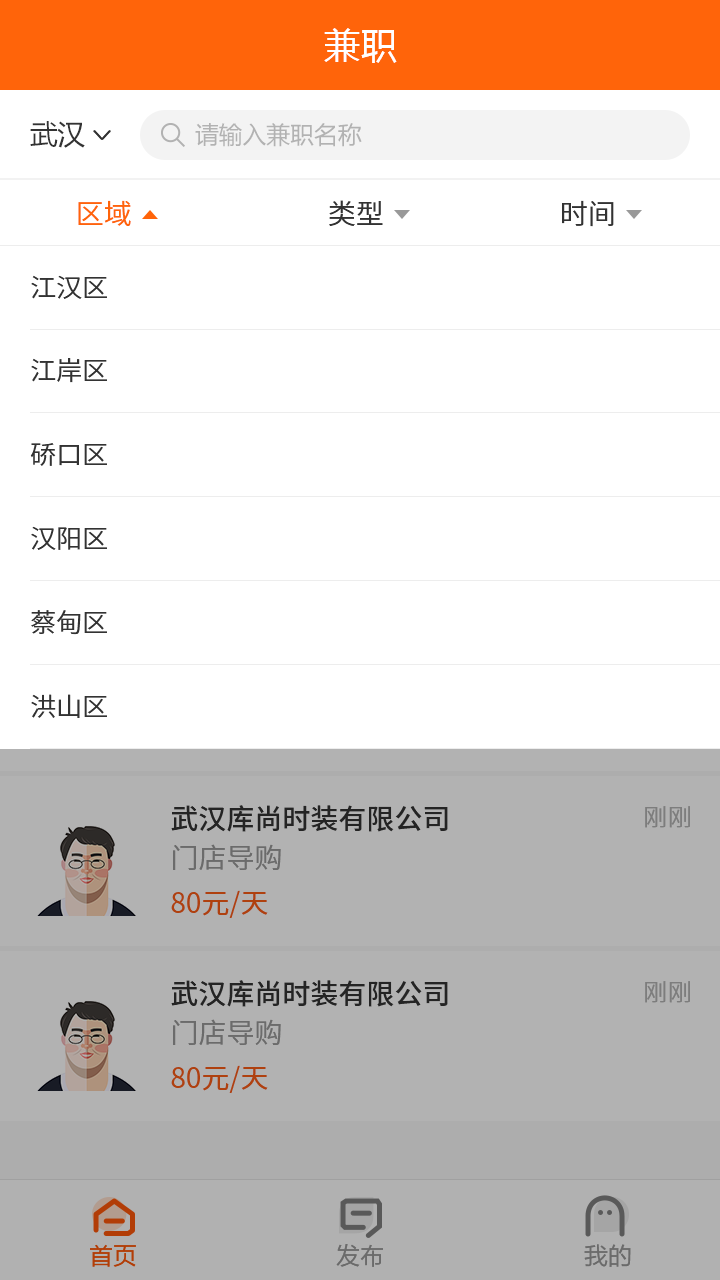
<style>
.page{position:relative;width:720px;height:1280px;background:#ffffff}
.page>*{position:absolute;margin:0}
.t1{font:36px "MicrosoftYaHei";letter-spacing:0.03em;color:#ffffff}
.t2{font:28px "MicrosoftYaHei";color:#333333}
.t3{font:24px "MicrosoftYaHei";color:#b2b2b2}
.t4{font:28px "NotoSansCJKsc-DemiLight";color:#ff640a;font-variant:small-caps}
.t5{font:28px "NotoSansCJKsc-DemiLight";color:#333333;font-variant:small-caps}
.t6{font:26px "NotoSansCJKsc-DemiLight";color:#333333}
.t7{font:28px "NotoSansCJKsc-Medium";color:#333333;font-variant:small-caps}
.t8{font:24px "NotoSansCJKsc-DemiLight";letter-spacing:0.03em;color:#7d7d7d;font-variant:small-caps}
.t9{font:28px "NotoSansCJKsc-DemiLight";color:#6b6b6b;font-variant:small-caps}
.t10{font:28px "NotoSansCJKsc-Regular";color:#af410f;font-variant:small-caps}
.t11{font:24px "FZLTHJW--GB1-0";color:#b23d07}
.t12{font:24px "FZLTHJW--GB1-0";color:#6b6b6b}
</style>
<div class="page">
<p class="t1" style="left:324px;top:28px;width:73px;height:35px">兼职</p>
<p class="t2" style="left:30px;top:121px;width:55px;height:27px">武汉</p>
<p class="t3" style="left:195px;top:123px;width:167px;height:24px">请输入兼职名称</p>
<p class="t4" style="left:78px;top:200px;width:53px;height:26px">区域</p>
<p class="t5" style="left:329px;top:200px;width:54px;height:26px">类型</p>
<p class="t5" style="left:562px;top:200px;width:52px;height:27px">时间</p>
<p class="t6" style="left:31px;top:275px;width:76px;height:24px">江汉区</p>
<p class="t6" style="left:31px;top:358px;width:76px;height:25px">江岸区</p>
<p class="t6" style="left:30px;top:443px;width:77px;height:23px">硚口区</p>
<p class="t6" style="left:31px;top:526px;width:76px;height:24px">汉阳区</p>
<p class="t6" style="left:31px;top:610px;width:76px;height:25px">蔡甸区</p>
<p class="t6" style="left:31px;top:694px;width:76px;height:24px">洪山区</p>
<p class="t7" style="left:171px;top:805px;width:277px;height:27px">武汉库尚时装有限公司</p>
<p class="t8" style="left:645px;top:806px;width:45px;height:22px">刚刚</p>
<p class="t9" style="left:173px;top:844px;width:108px;height:26px">门店导购</p>
<p class="t10" style="left:171px;top:890px;width:97px;height:28px">80元/天</p>
<p class="t7" style="left:171px;top:980px;width:277px;height:27px">武汉库尚时装有限公司</p>
<p class="t8" style="left:645px;top:981px;width:45px;height:22px">刚刚</p>
<p class="t9" style="left:173px;top:1019px;width:108px;height:26px">门店导购</p>
<p class="t10" style="left:171px;top:1065px;width:97px;height:28px">80元/天</p>
<p class="t11" style="left:90px;top:1244px;width:46px;height:23px">首页</p>
<p class="t12" style="left:336px;top:1244px;width:47px;height:23px">发布</p>
<p class="t12" style="left:584px;top:1244px;width:47px;height:23px">我的</p>
</div>
